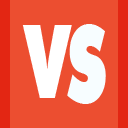
<style>
.page{position:relative;width:128px;height:128px;background:#ec4e30}
.page>*{position:absolute;margin:0}
.t1{font:102.7px "FuturaBT-ExtraBlack";letter-spacing:-0.01em;color:#ffffff;scale:0.61 1}
.t2{font:107.5px "FuturaBT-ExtraBlack";letter-spacing:-0.01em;color:#f7fdff;scale:0.61 1}
</style>
<div class="page">
<p class="t1" style="left:22px;top:25px;width:50px;height:73px">V</p>
<p class="t2" style="left:67px;top:24px;width:39px;height:80px">S</p>
</div>
